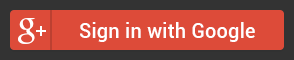
<style>
.page{position:relative;width:294px;height:60px;background:#dd4b39}
.page>*{position:absolute;margin:0}
.t1{font:20px "Roboto-Medium";letter-spacing:0.01em;color:#ffffff}
</style>
<div class="page">
<p class="t1" style="left:80px;top:22px;width:175px;height:20px">Sign in with Google</p>
</div>
